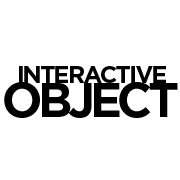
<style>
.page{position:relative;width:180px;height:180px;background:#ffffff}
.page>*{position:absolute;margin:0}
.t1{font:24px "Gotham-Bold";letter-spacing:-0.075em;color:#000000}
.t2{font:48px "Gotham-Bold";letter-spacing:-0.1em;color:#000000}
</style>
<div class="page">
<p class="t1" style="left:19px;top:66px;width:147px;height:17px">INTERACTIVE</p>
<p class="t2" style="left:4px;top:82px;width:174px;height:36px">OBJECT</p>
</div>
